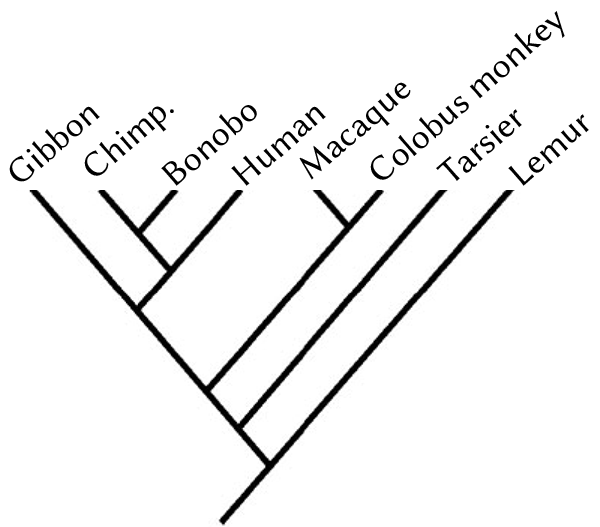
<style>
.page{position:relative;width:600px;height:527px;background:#ffffff}
.page>*{position:absolute;margin:0}
.t1{font:36px "LinBiolinumO";color:#000000}
</style>
<div class="page">
<p class="t1" style="left:370px;top:11px;width:195px;height:169px;rotate:-41deg">Colobus monkey</p>
<p class="t1" style="left:299px;top:82px;width:112px;height:98px;rotate:-41deg">Macaque</p>
<p class="t1" style="left:9px;top:106px;width:91px;height:76px;rotate:-41deg">Gibbon</p>
<p class="t1" style="left:84px;top:106px;width:90px;height:70px;rotate:-41deg">Chimp.</p>
<p class="t1" style="left:161px;top:105px;width:96px;height:81px;rotate:-41deg">Bonobo</p>
<p class="t1" style="left:231px;top:106px;width:95px;height:80px;rotate:-41deg">Human</p>
<p class="t1" style="left:436px;top:109px;width:86px;height:72px;rotate:-41deg">Tarsier</p>
<p class="t1" style="left:508px;top:114px;width:81px;height:72px;rotate:-41deg">Lemur</p>
</div>
